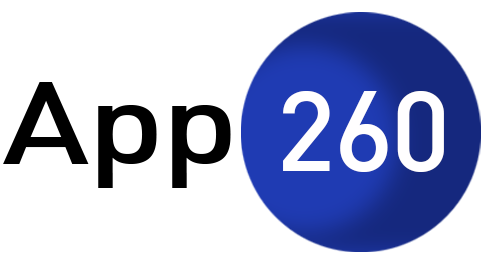
<style>
.page{position:relative;width:492px;height:263px;background:#ffffff}
.page>*{position:absolute;margin:0}
.t1{font:114.8px "DIN-Medium";letter-spacing:-0.02em;color:#000000;scale:1.22 1}
.t2{font:112.3px "DIN-Medium";letter-spacing:-0.02em;color:#fffeff}
</style>
<div class="page">
<p class="t1" style="left:3px;top:82px;width:228px;height:106px">App</p>
<p class="t2" style="left:283px;top:91px;width:161px;height:81px">260</p>
</div>
